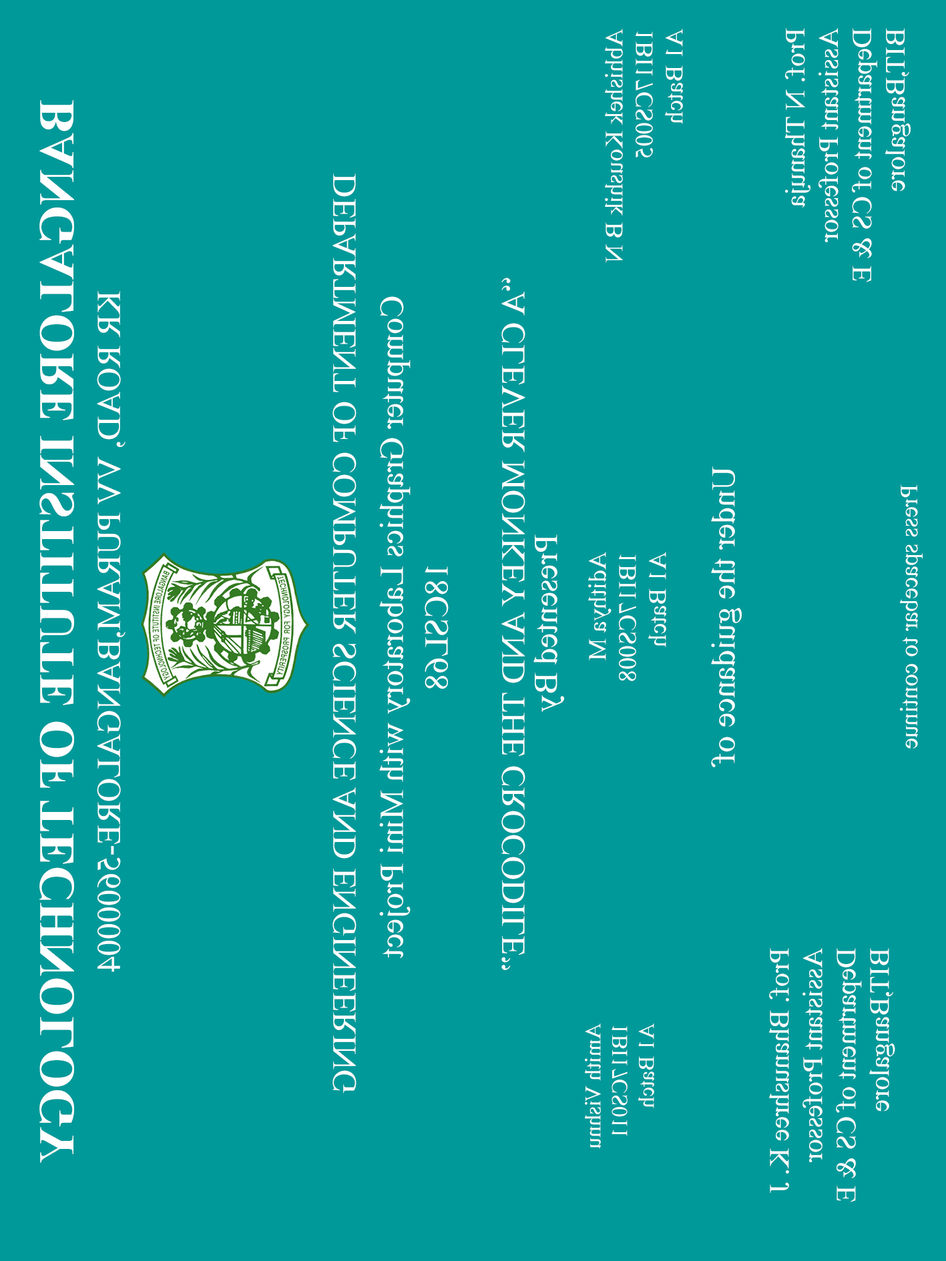
<style>
.page{position:relative;width:946px;height:1261px;background:#009999}
.page>*{position:absolute;margin:0}
.t1{font:25px "TimesNewRomanPSMT";color:#ffffff}
.t2{font:27.8px "TimesNewRomanPSMT";color:#ffffff}
.t3{font:50px "TimesNewRomanPS-BoldMT";color:#ffffff}
.t4{font:33.4px "TimesNewRomanPSMT";color:#ffffff}
.t5{font:22.2px "TimesNewRomanPSMT";color:#ffffff}
</style>
<div class="page">
<p class="t1" style="left:605px;top:29px;width:78px;height:234px;rotate:90deg">Abhishek Koushik B N<br>1BI17CS005<br>A1 Batch</p>
<p class="t2" style="left:785px;top:28px;width:125px;height:254px;rotate:90deg">Prof. N Thanuja<br>Assistant Professor<br>Department of CS &amp; E<br>BIT,Bangalore</p>
<p class="t3" style="left:39px;top:100px;width:35px;height:1063px;rotate:90deg">BANGALORE INSTITUTE OF TECHNOLOGY</p>
<p class="t4" style="left:332px;top:173px;width:24px;height:921px;rotate:90deg">DEPARTMENT OF COMPUTER SCIENCE AND ENGINEERING</p>
<p class="t4" style="left:501px;top:278px;width:24px;height:692px;rotate:90deg">“A CLEVER MONKEY AND THE CROCODILE”</p>
<p class="t4" style="left:97px;top:291px;width:28px;height:681px;rotate:90deg">KR ROAD, VV PURAM,BANGALORE-5600004</p>
<p class="t4" style="left:379px;top:296px;width:31px;height:662px;rotate:90deg">Computer Graphics Laboratory with Mini Project</p>
<p class="t4" style="left:711px;top:466px;width:30px;height:301px;rotate:90deg">Under the guidance of</p>
<p class="t1" style="left:899px;top:484px;width:23px;height:265px;rotate:90deg">Press spacebar to continue</p>
<p class="t4" style="left:533px;top:534px;width:31px;height:178px;rotate:90deg">Presented By</p>
<p class="t1" style="left:588px;top:552px;width:78px;height:129px;rotate:90deg">Adithya M<br>1BI17CS008<br>A1 Batch</p>
<p class="t4" style="left:424px;top:567px;width:24px;height:122px;rotate:90deg">18CSL68</p>
<p class="t2" style="left:769px;top:948px;width:126px;height:254px;rotate:90deg">Prof. Bhanushree K. J<br>Assistant Professor<br>Department of CS &amp; E<br>BIT,Bangalore</p>
<p class="t5" style="left:585px;top:1024px;width:69px;height:125px;rotate:90deg">Amith Vishnu<br>1BI17CS011<br>A1 Batch</p>
</div>
